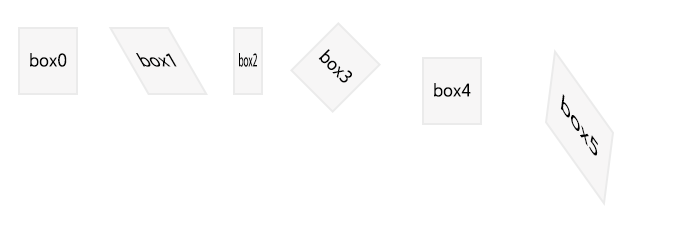
<style>
.page{position:relative;width:677px;height:237px;background:#ffffff}
.page>*{position:absolute;margin:0}
.t1{font:18px "FZYOUH_508R--GB1-4";color:#000000}
.t2{font:20.8px "FZYOUH_508R--GB1-4";color:#000000;scale:0.87 1}
.t3{font:18px "FZYOUH_508R--GB1-4";color:#000000;scale:0.5 1}
.t4{font:18.1px "FZYOUH_508R--GB1-4";color:#000000}
.t5{font:19.6px "FZYOUH_508R--GB1-4";color:#000000;scale:1.57 1}
</style>
<div class="page">
<p class="t1" style="left:30px;top:53px;width:37px;height:14px">box0</p>
<p class="t2" style="left:136px;top:53px;width:41px;height:14px">box1</p>
<p class="t3" style="left:239px;top:53px;width:18px;height:14px">box2</p>
<p class="t4" style="left:318px;top:49px;width:34px;height:34px;rotate:45deg">box3</p>
<p class="t1" style="left:434px;top:83px;width:37px;height:14px">box4</p>
<p class="t5" style="left:560px;top:94px;width:38px;height:62px;rotate:54deg">box5</p>
</div>
